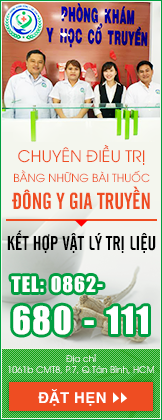
<style>
.page{position:relative;width:162px;height:420px}
.page>*{position:absolute;margin:0}
.t1{font:11px/20px "UTM-Avo";color:#ee4d22}
.t2{font:16px/20px "UTM-Avo";color:#ee4d22}
.t3{font:23px "UTM-Cafeta";color:#ee4d22}
.t4{font:20px "UTM-Cafeta";color:#000000}
.t5{font:20px "UTM-Impact";letter-spacing:0.05em;color:#ffffff}
.t6{font:35px "UTM-Impact";letter-spacing:0.05em;color:#ffffff}
.t7{font:9px "UTM-Avo";color:#ffffff}
.t8{font:15px "UTMHelveBold";color:#ffffff}
</style>
<div class="page">
<p class="t1" style="left:12px;top:145px;width:138px;height:65px;text-align:center"><span class="t2">CHUYÊN ĐIỀU TRỊ<br></span>BẰNG NHỮNG BÀI THUỐC<br><span class="t3">ĐÔNG Y GIA TRUYỀN</span></p>
<p class="t4" style="left:7px;top:230px;width:149px;height:23px">KẾT HỢP VẬT LÝ TRỊ LIỆU</p>
<p class="t5" style="left:11px;top:276px;width:137px;height:59px">TEL: 0862-<br><span class="t6">680 - 111</span></p>
<p class="t7" style="left:8px;top:354px;width:146px;height:20px;text-align:center">Địa chỉ<br>1061b CMT8, P.7, Q.Tân Bình, HCM</p>
<p class="t8" style="left:38px;top:389px;width:68px;height:17px">ĐẶT HẸN</p>
</div>
